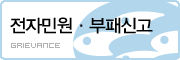
<style>
.page{position:relative;width:180px;height:60px;background:#ffffff}
.page>*{position:absolute;margin:0}
.t1{font:18px "YDIYGO330";letter-spacing:-0.05em;color:#000000}
</style>
<div class="page">
<p class="t1" style="left:10px;top:17px;width:143px;height:17px">전자민원·부패신고</p>
</div>
